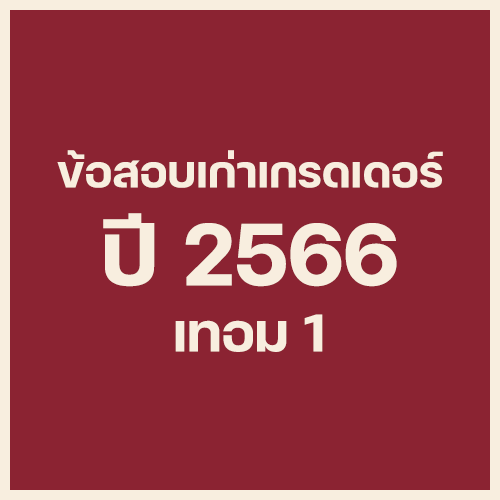
<style>
.page{position:relative;width:500px;height:500px;background:#8b2332}
.page>*{position:absolute;margin:0}
.t1{font:60px "FCMinimalBold";color:#f8eedf}
.t2{font:120px "FCMinimalBold";color:#f8eedf}
.t3{font:72px "FCMinimalBold";color:#f8eedf}
</style>
<div class="page">
<p class="t1" style="left:57px;top:150px;width:386px;height:38px">ข้อสอบเก่าเกรดเดอร์</p>
<p class="t2" style="left:103px;top:213px;width:294px;height:74px">ปี 2566</p>
<p class="t3" style="left:175px;top:314px;width:148px;height:38px">เทอม 1</p>
</div>
